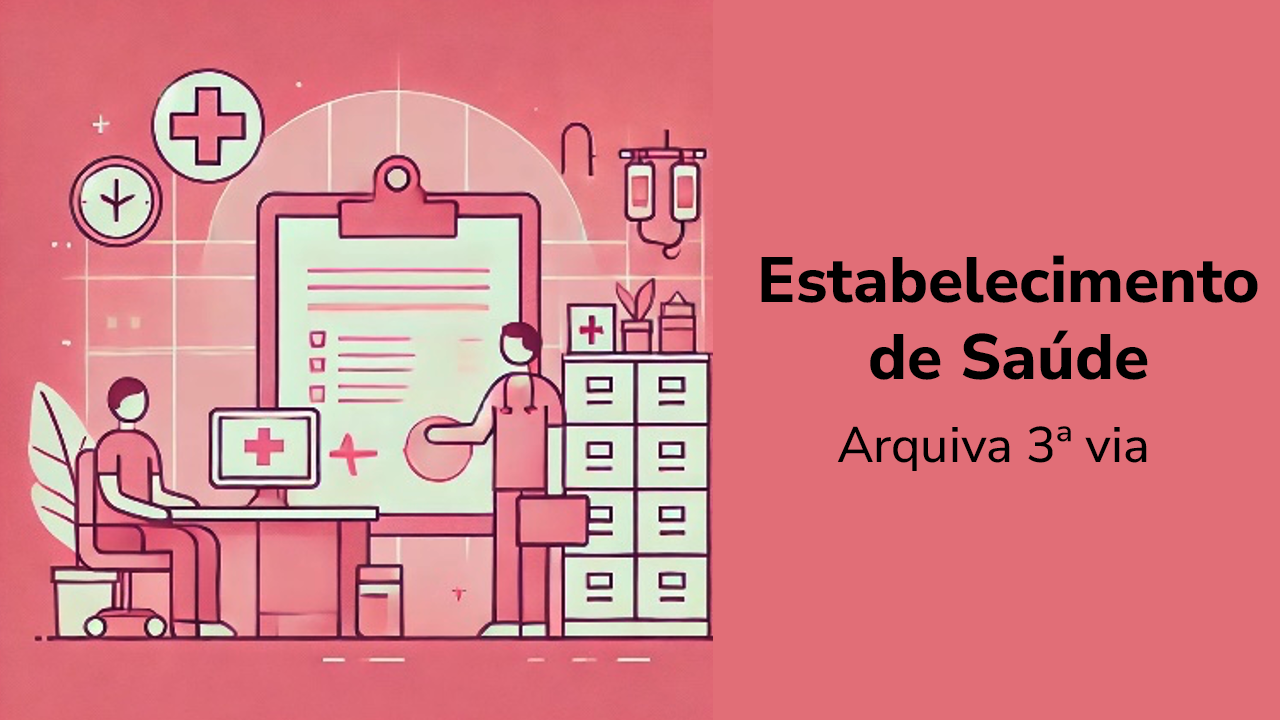
<style>
.page{position:relative;width:1280px;height:720px;background:#e16e77}
.page>*{position:absolute;margin:0}
.t1{font:64px "NunitoSans-ExtraBold";color:#000000}
.t2{font:50px "NunitoSans-Medium";color:#000000}
</style>
<div class="page">
<p class="t1" style="left:761px;top:255px;width:497px;height:125px;text-align:center">Estabelecimento de Saúde</p>
<p class="t2" style="left:837px;top:426px;width:310px;height:45px">Arquiva 3ª via</p>
</div>
